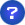
<style>
.page{position:relative;width:25px;height:25px;background:#ffffff}
.page>*{position:absolute;margin:0}
.t1{font:23px "BankGothicBT-Medium";color:#ffffff}
</style>
<div class="page">
<p class="t1" style="left:7px;top:7px;width:11px;height:12px">?</p>
</div>
